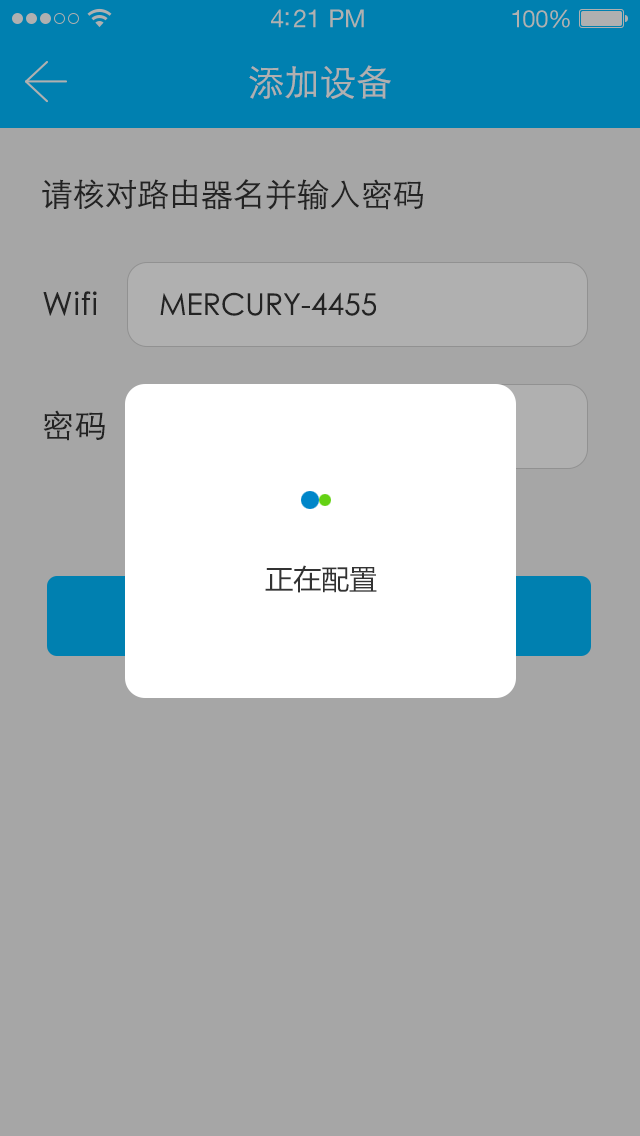
<style>
.page{position:relative;width:640px;height:1136px;background:#a6a6a6}
.page>*{position:absolute;margin:0}
.t1{font:25px "HelveticaNeueLTStd-Roman";letter-spacing:-0.02em;color:#b0b0b0}
.t2{font:24px "HelveticaNeueLTStd-Roman";letter-spacing:-0.02em;color:#b0b0b0}
.t3{font:36px "STXihei";color:#b0b0b0;text-transform:uppercase}
.t4{font:32px "STXihei";color:#333333}
.t5{font:32px "STXihei";letter-spacing:0.025em;color:#333333}
.t6{font:30px "STXihei";color:#333333}
.t7{font:28px "MicrosoftYaHei";color:#333333;text-transform:uppercase}
</style>
<div class="page">
<p class="t1" style="left:271px;top:9px;width:93px;height:19px">4:21 PM</p>
<p class="t2" style="left:512px;top:9px;width:58px;height:19px">100%</p>
<p class="t3" style="left:249px;top:65px;width:142px;height:34px">添加设备</p>
<p class="t4" style="left:42px;top:179px;width:381px;height:31px">请核对路由器名并输入密码</p>
<p class="t5" style="left:43px;top:291px;width:54px;height:25px">Wifi</p>
<p class="t6" style="left:160px;top:292px;width:216px;height:24px">MERCURY-4455</p>
<p class="t5" style="left:43px;top:410px;width:62px;height:31px">密码</p>
<p class="t7" style="left:265px;top:565px;width:112px;height:28px">正在配置</p>
</div>
